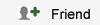
<style>
.page{position:relative;width:100px;height:25px;background:#f5f5f5}
.page>*{position:absolute;margin:0}
.t1{font:18px "Anja-Eliane-Nornal";color:#336633}
.t2{font:14px "ArialMT";color:#030006}
</style>
<div class="page">
<p class="t1" style="left:30px;top:6px;width:10px;height:11px">+</p>
<p class="t2" style="left:52px;top:9px;width:38px;height:10px">Friend</p>
</div>
